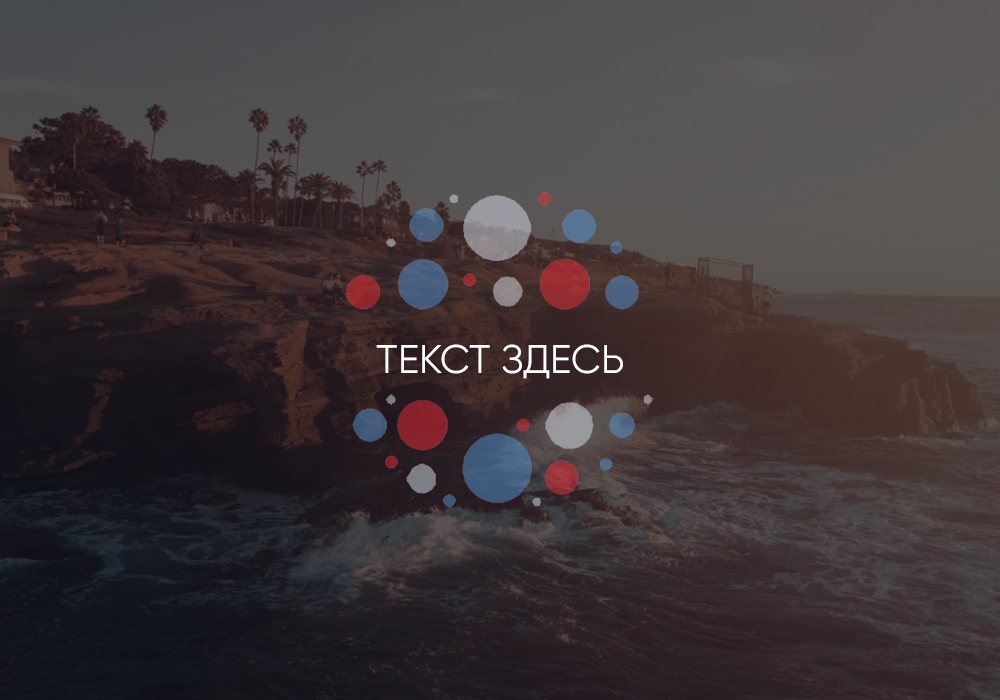
<style>
.page{position:relative;width:1000px;height:700px}
.page>*{position:absolute;margin:0}
.t1{font:40px "Gilroy-Regular";color:#ffffff}
</style>
<div class="page">
<p class="t1" style="left:376px;top:344px;width:247px;height:35px">ТЕКСТ ЗДЕСЬ</p>
</div>
